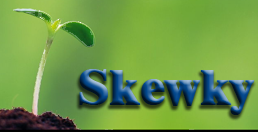
<style>
.page{position:relative;width:258px;height:132px}
.page>*{position:absolute;margin:0}
.t1{font:49.5px "Dutch801BT-ExtraBold";font-weight:bold}
</style>
<div class="page">
<p class="t1" style="left:79px;top:69px;width:176px;height:46px">Skewky</p>
</div>
